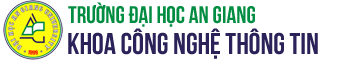
<style>
.page{position:relative;width:350px;height:60px;background:#ffffff}
.page>*{position:absolute;margin:0}
.t1{font:24px "UTM-Bebas";color:#008d41}
.t2{font:30px "UTM-Bebas";color:#2a2258}
</style>
<div class="page">
<p class="t1" style="left:68px;top:2px;width:187px;height:25px">trường đại học an giang</p>
<p class="t2" style="left:68px;top:28px;width:250px;height:31px">khoa công nghệ thông tin</p>
</div>
